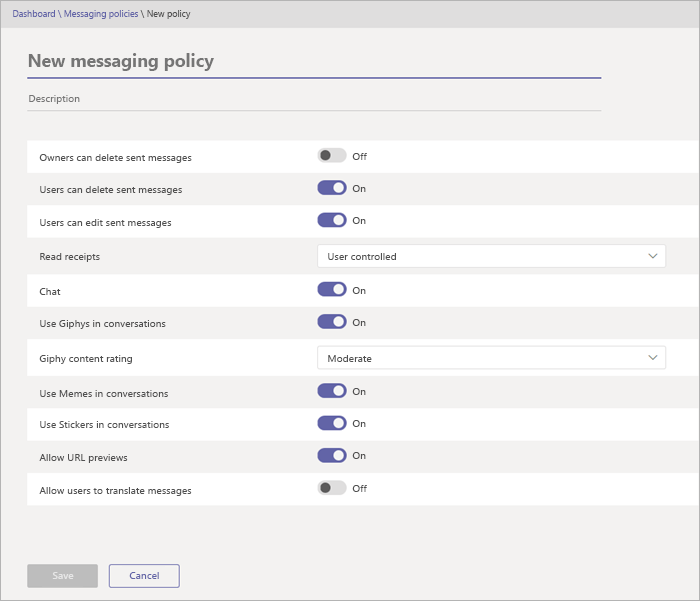
<style>
.page{position:relative;width:700px;height:601px;background:#f3f2f1}
.page>*{position:absolute;margin:0}
.t1{font:8.9px "SegoeUI";color:#6264a7}
.t2{font:8.9px "SegoeUI";color:#505050}
.t3{font:17.7px "SegoeUI-Bold";color:#757575}
.t4{font:10.3px "SegoeUI";color:#757575}
.t5{font:10.3px "SegoeUI";color:#505050}
.t6{font:10.1px "SegoeUI-Semibold";color:#e6e6e6}
.t7{font:10.3px "SegoeUI";color:#6264a7}
</style>
<div class="page">
<p class="t1" style="left:13px;top:10px;width:178px;height:9px">Dashboard \ Messaging policies <span class="t2">\ New policy</span></p>
<p class="t3" style="left:28px;top:53px;width:186px;height:18px">New messaging policy</p>
<p class="t4" style="left:29px;top:95px;width:51px;height:9px">Description</p>
<p class="t5" style="left:39px;top:154px;width:153px;height:9px">Owners can delete sent messages</p>
<p class="t5" style="left:352px;top:153px;width:15px;height:7px">Off</p>
<p class="t5" style="left:352px;top:185px;width:14px;height:7px">On</p>
<p class="t5" style="left:40px;top:186px;width:142px;height:9px">Users can delete sent messages</p>
<p class="t5" style="left:40px;top:219px;width:132px;height:9px">Users can edit sent messages</p>
<p class="t5" style="left:352px;top:217px;width:14px;height:7px">On</p>
<p class="t5" style="left:40px;top:253px;width:60px;height:9px">Read receipts</p>
<p class="t5" style="left:328px;top:253px;width:68px;height:7px">User controlled</p>
<p class="t5" style="left:39px;top:288px;width:22px;height:7px">Chat</p>
<p class="t5" style="left:352px;top:287px;width:14px;height:7px">On</p>
<p class="t5" style="left:40px;top:320px;width:126px;height:9px">Use Giphys in conversations</p>
<p class="t5" style="left:352px;top:319px;width:14px;height:7px">On</p>
<p class="t5" style="left:39px;top:355px;width:93px;height:9px">Giphy content rating</p>
<p class="t5" style="left:328px;top:355px;width:44px;height:7px">Moderate</p>
<p class="t5" style="left:40px;top:390px;width:128px;height:7px">Use Memes in conversations</p>
<p class="t5" style="left:352px;top:388px;width:14px;height:7px">On</p>
<p class="t5" style="left:40px;top:421px;width:129px;height:7px">Use Stickers in conversations</p>
<p class="t5" style="left:352px;top:420px;width:14px;height:7px">On</p>
<p class="t5" style="left:39px;top:454px;width:89px;height:9px">Allow URL previews</p>
<p class="t5" style="left:352px;top:452px;width:14px;height:7px">On</p>
<p class="t5" style="left:352px;top:485px;width:15px;height:7px">Off</p>
<p class="t5" style="left:39px;top:487px;width:153px;height:9px">Allow users to translate messages</p>
<p class="t6" style="left:52px;top:572px;width:22px;height:7px">Save</p>
<p class="t7" style="left:129px;top:572px;width:30px;height:7px">Cancel</p>
</div>
